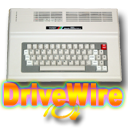
<style>
.page{position:relative;width:128px;height:128px}
.page>*{position:absolute;margin:0}
.t1{font:30.4px "Arial-Black";letter-spacing:0.01em;font-weight:bold;scale:0.7 1}
</style>
<div class="page">
<p class="t1" style="left:4px;top:83px;width:119px;height:23px">DriveWire</p>
</div>
